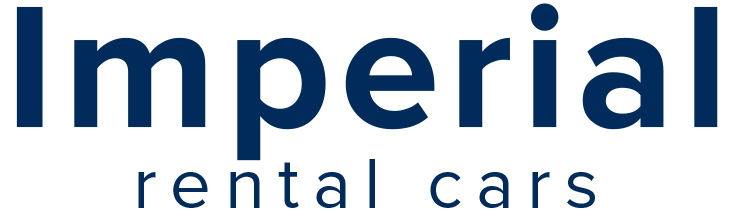
<style>
.page{position:relative;width:733px;height:216px;background:#ffffff}
.page>*{position:absolute;margin:0}
.t1{font:180px "ProximaNova-Bold";letter-spacing:0.05em;color:#002b5a}
.t2{font:72px "ProximaNova-Regular";letter-spacing:0.19em;color:#002b5a}
</style>
<div class="page">
<p class="t1" style="left:16px;top:3px;width:702px;height:158px">Imperial</p>
<p class="t2" style="left:138px;top:159px;width:457px;height:49px">rental cars</p>
</div>
